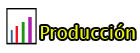
<style>
.page{position:relative;width:140px;height:53px;background:#ffffff}
.page>*{position:absolute;margin:0}
.t1{font:36px "TrebuchetMS";color:#ab1ea9}
.t2{font:18px "TrebuchetMS";color:#276396}
.t3{font:24px "TrebuchetMS";color:#f21126}
.t4{font:30px "TrebuchetMS";color:#209410}
.t5{font:18px "LucidaSansUnicode";color:#e8f60e}
</style>
<div class="page">
<p class="t1" style="left:28px;top:17px;width:4px;height:26px">I</p>
<p class="t2" style="left:10px;top:30px;width:3px;height:13px">I</p>
<p class="t3" style="left:15px;top:26px;width:3px;height:17px">I</p>
<p class="t4" style="left:21px;top:22px;width:4px;height:21px">I</p>
<p class="t5" style="left:41px;top:24px;width:94px;height:15px">Producción</p>
</div>
